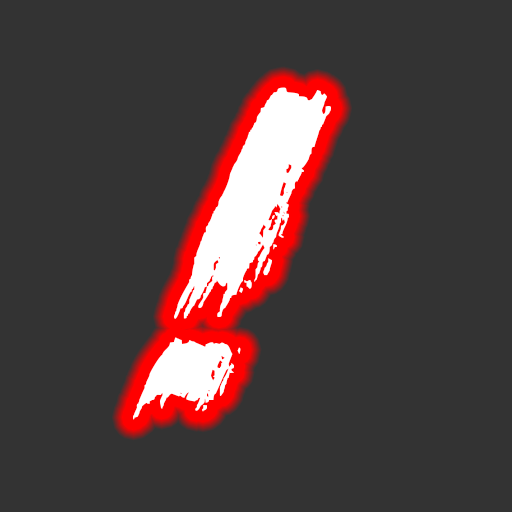
<style>
.page{position:relative;width:512px;height:512px;background:#333333}
.page>*{position:absolute;margin:0}
.t1{font:400px "RoadRage";color:#ffffff}
</style>
<div class="page">
<p class="t1" style="left:133px;top:87px;width:198px;height:333px">!</p>
</div>
